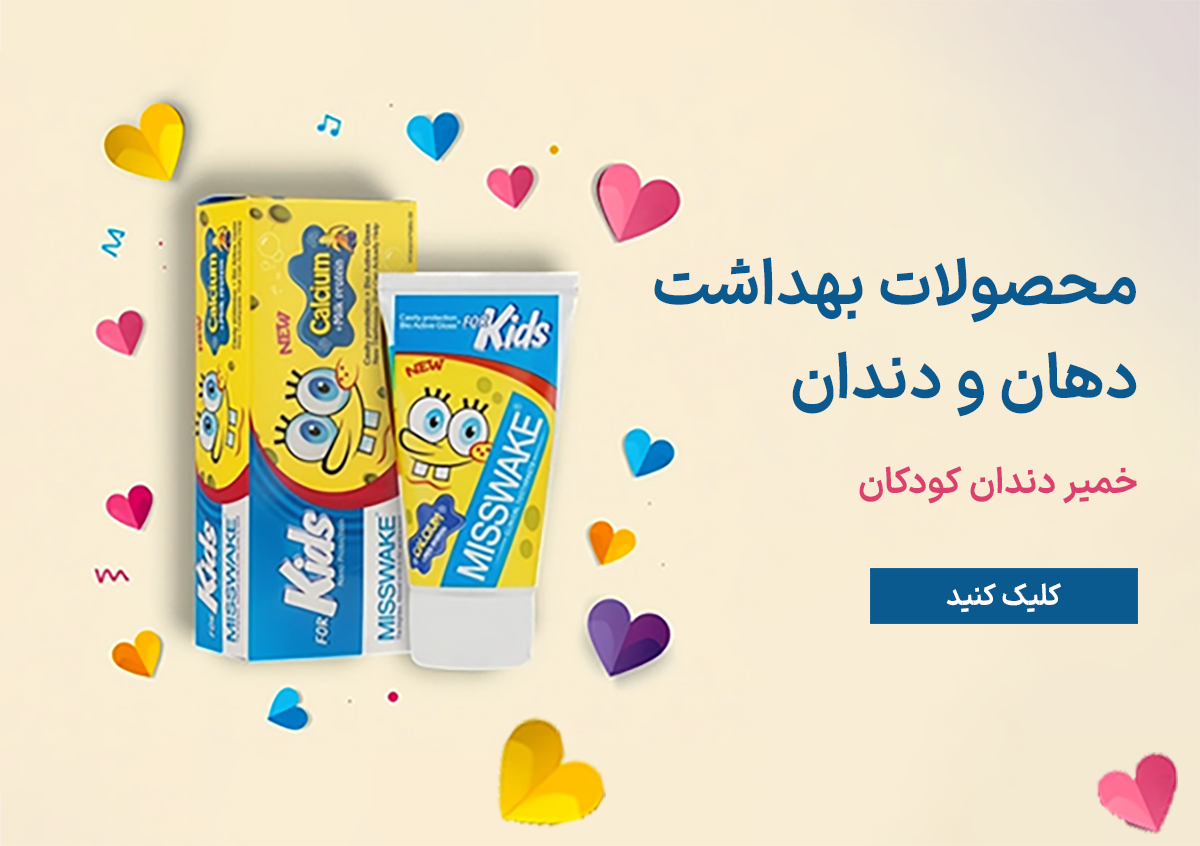
<style>
.page{position:relative;width:1200px;height:846px}
.page>*{position:absolute;margin:0}
.t1{font:63px/94.6px "IRANSansXFaNum-BoldD4";color:#0a5a8f}
.t2{font:36px/94.6px "IRANSansXFaNum-BoldD4";color:#db406f}
.t3{font:29.3px "IRANSansXFaNum-BoldD4";color:#ffffff;scale:0.96 1}
</style>
<div class="page">
<p class="t1" style="left:654px;top:257px;width:483px;height:247px;text-align:right">محصولات بهداشت دهان و دندان<br><span class="t2">خمیر دندان کودکان</span></p>
<p class="t3" style="left:946px;top:583px;width:115px;height:30px">کلیک کنید</p>
</div>
